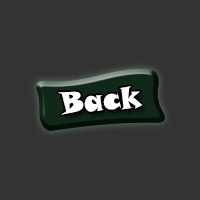
<style>
.page{position:relative;width:200px;height:200px;background:#333333}
.page>*{position:absolute;margin:0}
.t1{font:30px "SnapITC-Regular";color:#ffffff}
</style>
<div class="page">
<p class="t1" style="left:58px;top:86px;width:85px;height:29px;rotate:-5deg">Back</p>
</div>
